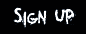
<style>
.page{position:relative;width:86px;height:34px;background:#010102}
.page>*{position:absolute;margin:0}
.t1{font:29.2px "YouMurdererBB";color:#ffffff}
</style>
<div class="page">
<p class="t1" style="left:13px;top:7px;width:63px;height:21px">Sign Up</p>
</div>
